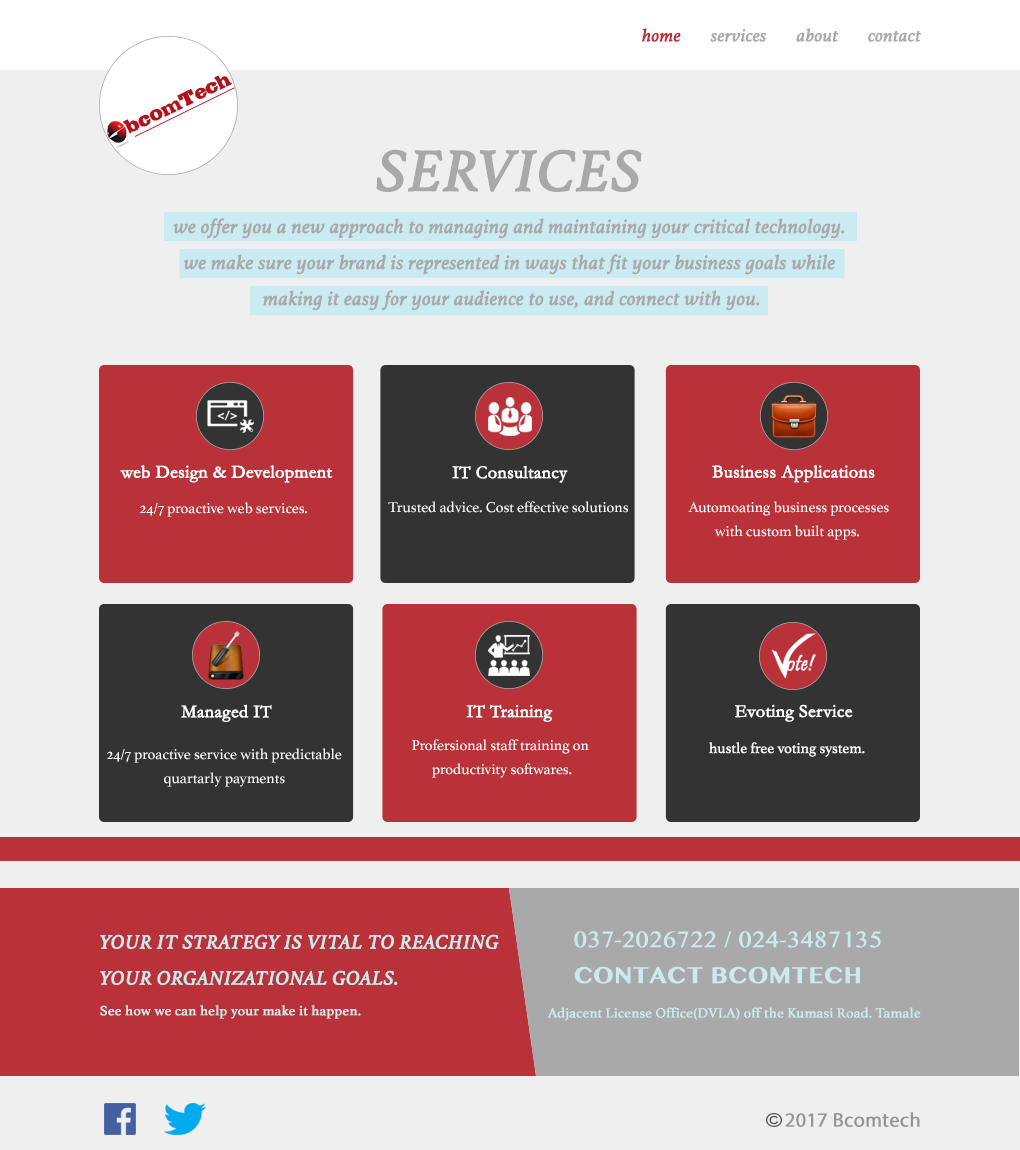
<style>
.page{position:relative;width:1020px;height:1150px;background:#efefef}
.page>*{position:absolute;margin:0}
.t1{font:18px "Athelas-Italic";color:#a9a9a9;font-weight:bold}
.t2{font:18px "Athelas-Italic";color:#b9323a;font-weight:bold}
.t3{font:60px "Athelas-Italic";color:#a9a9a9;font-weight:bold}
.t4{font:20px/36px "Athelas-Italic";color:#a9a9a9;font-weight:bold}
.t5{font:18px "Garamond";color:#ffffff;font-weight:bold}
.t6{font:15px "Athelas-Regular";color:#ffffff}
.t7{font:15px/24px "Athelas-Regular";color:#ffffff}
.t8{font:20px/36px "Athelas-Italic";color:#cbeaed;font-weight:bold}
.t9{font:20px/36px "BanglaMN";color:#cbeaed;font-weight:bold}
.t10{font:20px/36px "BanglaMN-Bold";color:#cbeaed;font-weight:bold}
.t11{font:14px "Athelas-Regular";color:#cbeaed;font-weight:bold}
.t12{font:20px "MyriadPro-Regular";color:#949494;font-weight:bold}
</style>
<div class="page">
<p class="t1" style="left:642px;top:28px;width:279px;height:14px"><span class="t2">home </span>      services       about       contact</p>
<p class="t3" style="left:376px;top:149px;width:266px;height:43px">SERVICES</p>
<p class="t4" style="left:173px;top:218px;width:672px;height:93px;text-align:center">we offer you a new approach to managing and maintaining your critical technology.<br>we make sure your brand is represented in ways that fit your business goals while<br> making it easy for your audience to use, and connect with you.</p>
<p class="t5" style="left:120px;top:465px;width:213px;height:18px">web Design &amp; Development</p>
<p class="t5" style="left:452px;top:465px;width:116px;height:18px">IT Consultancy</p>
<p class="t5" style="left:712px;top:465px;width:163px;height:18px">Business Applications</p>
<p class="t6" style="left:140px;top:502px;width:167px;height:15px">24/7 proactive web services.</p>
<p class="t6" style="left:388px;top:501px;width:240px;height:12px">Trusted advice. Cost effective solutions</p>
<p class="t7" style="left:688px;top:501px;width:201px;height:39px;text-align:center">Automoating business processes<br>with custom built apps.</p>
<p class="t5" style="left:181px;top:704px;width:91px;height:18px">Managed IT</p>
<p class="t5" style="left:466px;top:704px;width:87px;height:18px">IT Training</p>
<p class="t5" style="left:735px;top:704px;width:118px;height:18px">Evoting Service</p>
<p class="t7" style="left:107px;top:748px;width:235px;height:39px;text-align:center">24/7 proactive service with predictable<br> quartarly payments</p>
<p class="t7" style="left:412px;top:739px;width:177px;height:39px;text-align:center">Profersional staff training on <br>productivity softwares.</p>
<p class="t6" style="left:709px;top:742px;width:156px;height:15px">hustle free voting system.</p>
<p class="t8" style="left:100px;top:934px;width:399px;height:51px">YOUR IT STRATEGY IS VITAL TO REACHING<br>YOUR ORGANIZATIONAL GOALS.</p>
<p class="t9" style="left:574px;top:931px;width:307px;height:53px">037-2026722 / 024-3487135<br><span class="t10">CONTACT BCOMTECH</span></p>
<p class="t11" style="left:100px;top:1005px;width:261px;height:14px">See how we can help your make it happen.</p>
<p class="t11" style="left:547px;top:1007px;width:374px;height:14px">Adjacent License Office(DVLA) off the Kumasi Road. Tamale</p>
<p class="t12" style="left:785px;top:1112px;width:135px;height:15px">2017 Bcomtech</p>
</div>
